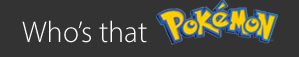
<style>
.page{position:relative;width:299px;height:57px;background:#333333}
.page>*{position:absolute;margin:0}
.t1{font:30px "MyriadPro-Light";color:#ffffff}
</style>
<div class="page">
<p class="t1" style="left:22px;top:20px;width:125px;height:23px">Who’s that</p>
</div>
